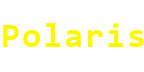
<style>
.page{position:relative;width:144px;height:72px;background:#ffffff}
.page>*{position:absolute;margin:0}
.t1{font:35px "Consolas-Bold";letter-spacing:0.05em;color:#fff602}
</style>
<div class="page">
<p class="t1" style="left:3px;top:23px;width:141px;height:24px">Polaris</p>
</div>
